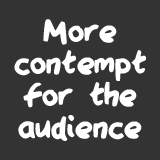
<style>
.page{position:relative;width:160px;height:160px;background:#333333}
.page>*{position:absolute;margin:0}
.t1{font:35.9px/31.9px "QAReports";color:#ffffff}
</style>
<div class="page">
<p class="t1" style="left:14px;top:19px;width:132px;height:122px;text-align:center">More<br>contempt<br>for the<br>audience</p>
</div>
